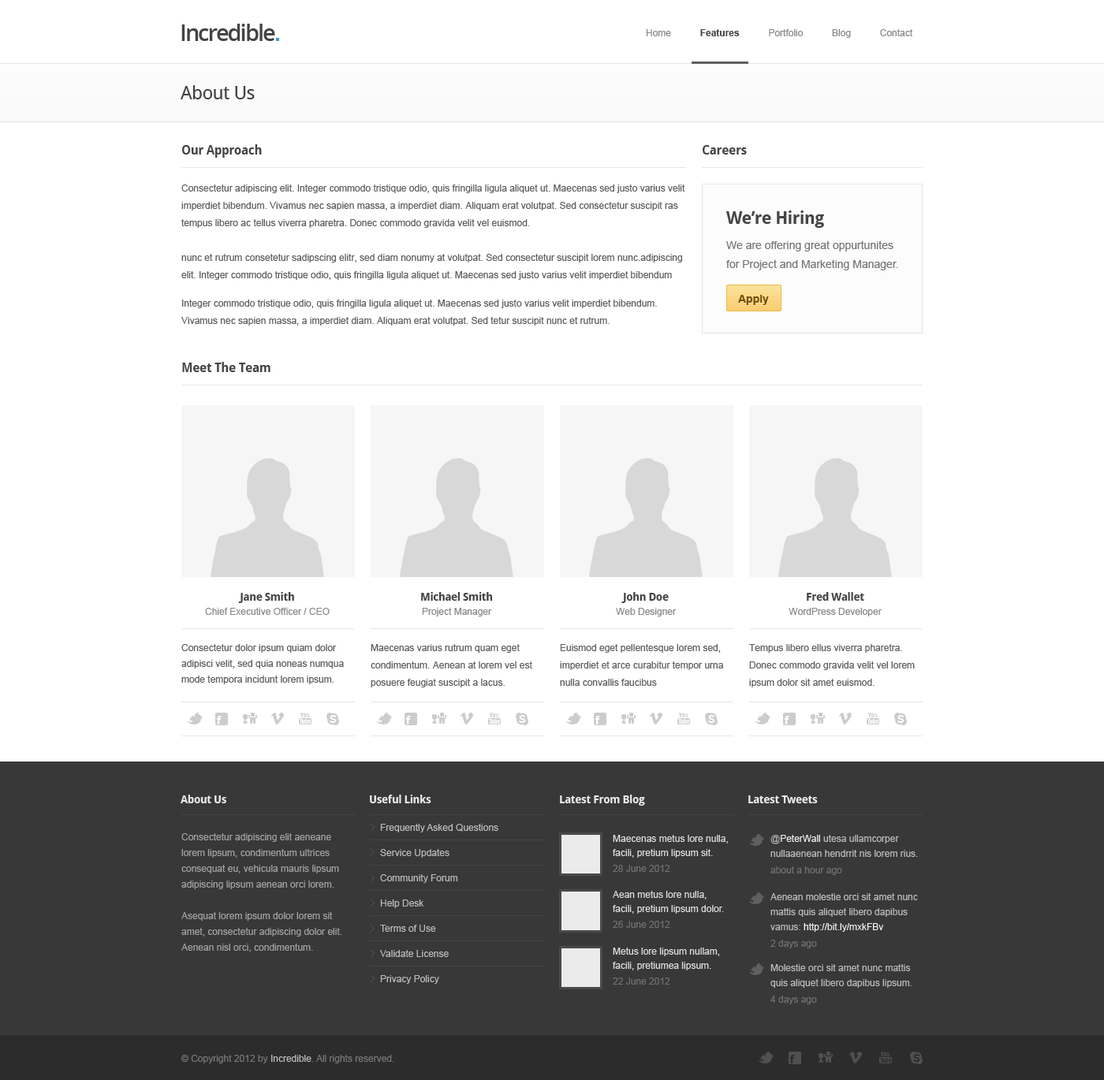
<style>
.page{position:relative;width:1104px;height:1080px;background:#ffffff}
.page>*{position:absolute;margin:0}
.t1{font:22.9px "OpenSans-Semibold";letter-spacing:-0.07em;color:#444444}
.t2{font:9.5px "ArialMT";color:#888888}
.t3{font:9.5px "Arial-BoldMT";color:#444444}
.t4{font:18.9px "DroidSans";letter-spacing:-0.025em;color:#444444}
.t5{font:9.5px/17.3px "ArialMT";color:#606060}
.t6{font:12.6px/16.6px "DroidSans-Bold";letter-spacing:-0.025em;color:#444444}
.t7{font:9.5px/20.5px "ArialMT";color:#606060}
.t8{font:9.5px/16.6px "ArialMT";color:#606060}
.t9{font:12.6px "DroidSans-Bold";letter-spacing:-0.025em;color:#464646}
.t10{font:11px/25.2px "ArialMT";color:#777777}
.t11{font:17.3px/23.7px "DroidSans-Bold";letter-spacing:-0.025em;color:#444444}
.t12{font:11px/18.9px "ArialMT";color:#777777}
.t13{font:11px "Arial-BoldMT";color:#754c00}
.t14{font:12.6px "DroidSans-Bold";letter-spacing:-0.025em;color:#444444}
.t15{font:9.5px/15.8px "ArialMT";color:#606060}
.t16{font:11px/14.2px "DroidSans-Bold";letter-spacing:-0.025em;color:#444444}
.t17{font:9.5px/14.2px "ArialMT";color:#888888}
.t18{font:9.5px/22.1px "ArialMT";color:#606060}
.t19{font:11px "DroidSans-Bold";letter-spacing:-0.025em;color:#ffffff}
.t20{font:9.5px/15.8px "ArialMT";color:#a1a1a1}
.t21{font:9.5px/25.2px "ArialMT";color:#bbbbbb}
.t22{font:9.5px/14.2px "ArialMT";color:#dddddd}
.t23{font:9.5px/15.8px "ArialMT";color:#707070}
.t24{font:9.5px/15px "ArialMT";color:#bbbbbb}
.t25{font:9.5px/15px "ArialMT";color:#eeeeee}
.t26{font:9.5px/16.6px "ArialMT";color:#707070}
.t27{font:9.5px/15px "ArialMT";color:#aaaaaa}
.t28{font:9.5px "ArialMT";color:#777777}
.t29{font:9.5px "ArialMT";color:#bbbbbb}
</style>
<div class="page">
<p class="t1" style="left:181px;top:24px;width:94px;height:17px">Incredible</p>
<p class="t2" style="left:646px;top:29px;width:266px;height:9px">Home           <span class="t3">Features           </span>Portfolio           Blog           Contact</p>
<p class="t4" style="left:181px;top:85px;width:74px;height:14px">About Us</p>
<p class="t5" style="left:181px;top:144px;width:504px;height:182px"><span class="t6">Our Approach<br><br></span><span class="t7">Consectetur adipiscing elit. Integer commodo tristique odio, quis fringilla ligula aliquet ut. </span><span class="t8">Maecenas </span>sed justo varius velit imperdiet bibendum. Vivamus nec sapien massa, a imperdiet diam. Aliquam erat volutpat. Sed consectetur suscipit ras tempus libero ac tellus viverra pharetra. Donec commodo gravida velit vel euismod.<br><br>nunc et rutrum consetetur sadipscing elitr, sed diam nonumy at volutpat. Sed consectetur suscipit lorem nunc.adipiscing elit. Integer commodo tristique odio, quis fringilla ligula aliquet ut. Maecenas sed justo varius velit imperdiet bibendum<br> <br>Integer commodo tristique odio, quis fringilla ligula aliquet ut. Maecenas sed justo varius velit imperdiet bibendum. Vivamus nec sapien massa, a imperdiet diam. Aliquam erat volutpat. Sed tetur suscipit nunc et rutrum.</p>
<p class="t9" style="left:703px;top:145px;width:44px;height:10px">Careers</p>
<p class="t10" style="left:726px;top:211px;width:172px;height:59px"><span class="t11">We’re Hiring<br></span>We are offering great oppurtunites <br><span class="t12">for Project and Marketing Manager.</span></p>
<p class="t13" style="left:738px;top:295px;width:31px;height:10px">Apply</p>
<p class="t14" style="left:182px;top:362px;width:88px;height:10px">Meet The Team</p>
<p class="t15" style="left:181px;top:592px;width:163px;height:92px;text-align:center"><span class="t16">Jane Smith<br></span><span class="t17">Chief Executive Officer / CEO<br><br></span><span class="t18">Consectetur dolor ipsum quiam dolor </span>adipisci velit, sed quia noneas numqua mode tempora incidunt lorem ipsum.</p>
<p class="t5" style="left:371px;top:592px;width:161px;height:96px;text-align:center"><span class="t16">Michael Smith<br></span><span class="t17">Project Manager<br><br></span><span class="t18">Maecenas varius rutrum quam eget </span>condimentum. Aenean at lorem vel est posuere feugiat suscipit a lacus.</p>
<p class="t5" style="left:560px;top:592px;width:163px;height:94px;text-align:center"><span class="t16">John Doe<br></span><span class="t17">Web Designer<br><br></span><span class="t18">Euismod eget pellentesque lorem sed, </span>imperdiet et arce curabitur tempor urna nulla convallis faucibus</p>
<p class="t5" style="left:749px;top:592px;width:166px;height:96px;text-align:center"><span class="t16">Fred Wallet<br></span><span class="t17">WordPress Developer<br><br></span><span class="t18">Tempus libero ellus viverra </span>pharetra. Donec commodo gravida velit vel lorem ipsum dolor sit amet euismod.</p>
<p class="t19" style="left:181px;top:795px;width:45px;height:8px;opacity:0.9">About Us</p>
<p class="t19" style="left:370px;top:795px;width:61px;height:8px;opacity:0.9">Useful Links</p>
<p class="t19" style="left:560px;top:795px;width:85px;height:11px;opacity:0.9">Latest From Blog</p>
<p class="t19" style="left:748px;top:796px;width:70px;height:7px;opacity:0.9">Latest Tweets</p>
<p class="t20" style="left:181px;top:833px;width:161px;height:119px">Consectetur adipiscing elit aeneane lorem lipsum, condimentum ultrices consequat eu, vehicula mauris lipsum adipiscing lipsum aenean orci lorem.<br> <br>Asequat lorem ipsum dolor lorem sit amet, consectetur adipiscing dolor elit. Aenean nisl orci, condimentum.</p>
<p class="t21" style="left:380px;top:824px;width:118px;height:160px">Frequently Asked Questions<br>Service Updates<br>Community Forum<br>Help Desk<br>Terms of Use<br>Validate License<br>Privacy Policy</p>
<p class="t22" style="left:613px;top:835px;width:115px;height:37px">Maecenas metus lore nulla, facili, pretium lipsum sit.<br><span class="t23">28 June 2012</span></p>
<p class="t24" style="left:770px;top:835px;width:148px;height:40px">@<span class="t25">PeterWall </span>utesa ullamcorper nullaaenean hendrrit nis lorem rius.<br><span class="t26">about a hour ago</span></p>
<p class="t22" style="left:613px;top:891px;width:111px;height:37px">Aean metus lore nulla, facili, pretium lipsum dolor.<br><span class="t23">26 June 2012</span></p>
<p class="t24" style="left:770px;top:893px;width:148px;height:56px">Aenean molestie orci sit amet nunc mattis quis aliquet libero dapibus vamus: <span class="t25">http://bit.ly/mxkFBv<br></span><span class="t26">2 days ago</span></p>
<p class="t22" style="left:613px;top:948px;width:107px;height:37px">Metus lore lipsum nullam, facili, pretiumea lipsum.<br><span class="t23">22 June 2012</span></p>
<p class="t24" style="left:770px;top:964px;width:142px;height:41px">Molestie orci sit amet nunc mattis quis aliquet libero dapibus lipsum<span class="t27">.<br></span><span class="t26">4 days ago</span></p>
<p class="t28" style="left:181px;top:1055px;width:213px;height:9px">© Copyright 2012 by <span class="t29">Incredible</span>. All rights reserved.</p>
</div>
